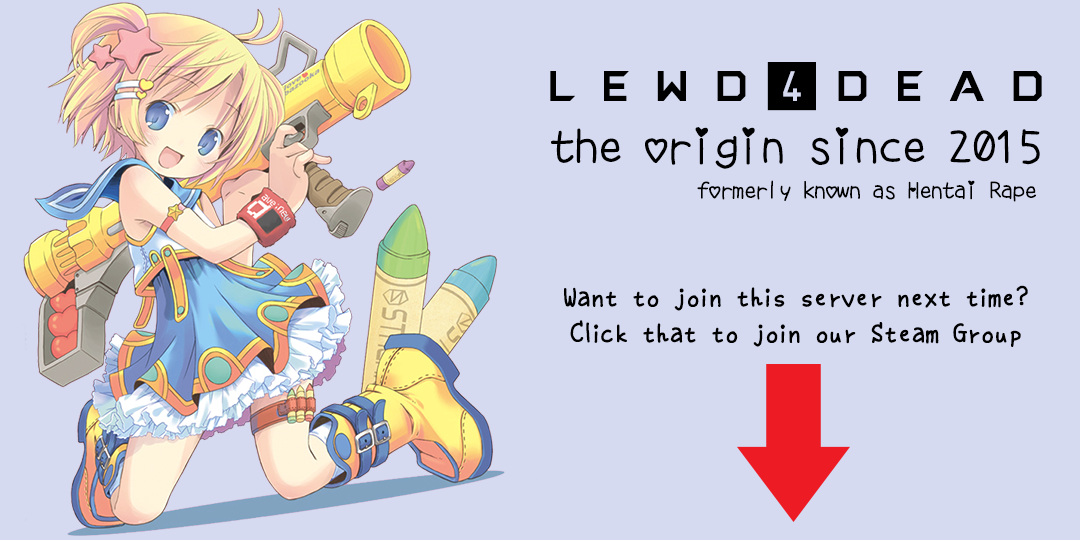
<style>
.page{position:relative;width:1080px;height:540px;background:#d5daf0}
.page>*{position:absolute;margin:0}
.t1{font:48px "AMDRTG";letter-spacing:0.22em;color:#000000}
.t2{font:48px "S2G-love";letter-spacing:-0.04em;color:#000000;font-weight:bold}
.t3{font:24px "S2G-love";letter-spacing:-0.04em;color:#000000;font-weight:bold}
.t4{font:30px "SNsanafonmaruP";letter-spacing:-0.04em;color:#000000}
</style>
<div class="page">
<p class="t1" style="left:550px;top:62px;width:492px;height:49px">lewd4dead</p>
<p class="t2" style="left:551px;top:127px;width:489px;height:42px">the origin since 2015</p>
<p class="t3" style="left:697px;top:180px;width:339px;height:22px">formerly known as Hentai Rape</p>
<p class="t4" style="left:564px;top:285px;width:464px;height:62px;text-align:center">Want to join this server next time?<br>Click that to join our Steam Group</p>
</div>
